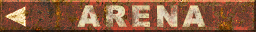
<style>
.page{position:relative;width:256px;height:32px}
.page>*{position:absolute;margin:0}
.t1{font:29.3px "Arial-Black";letter-spacing:0.12em;text-transform:uppercase}
</style>
<div class="page">
<p class="t1" style="left:77px;top:5px;width:129px;height:22px">arena</p>
</div>
